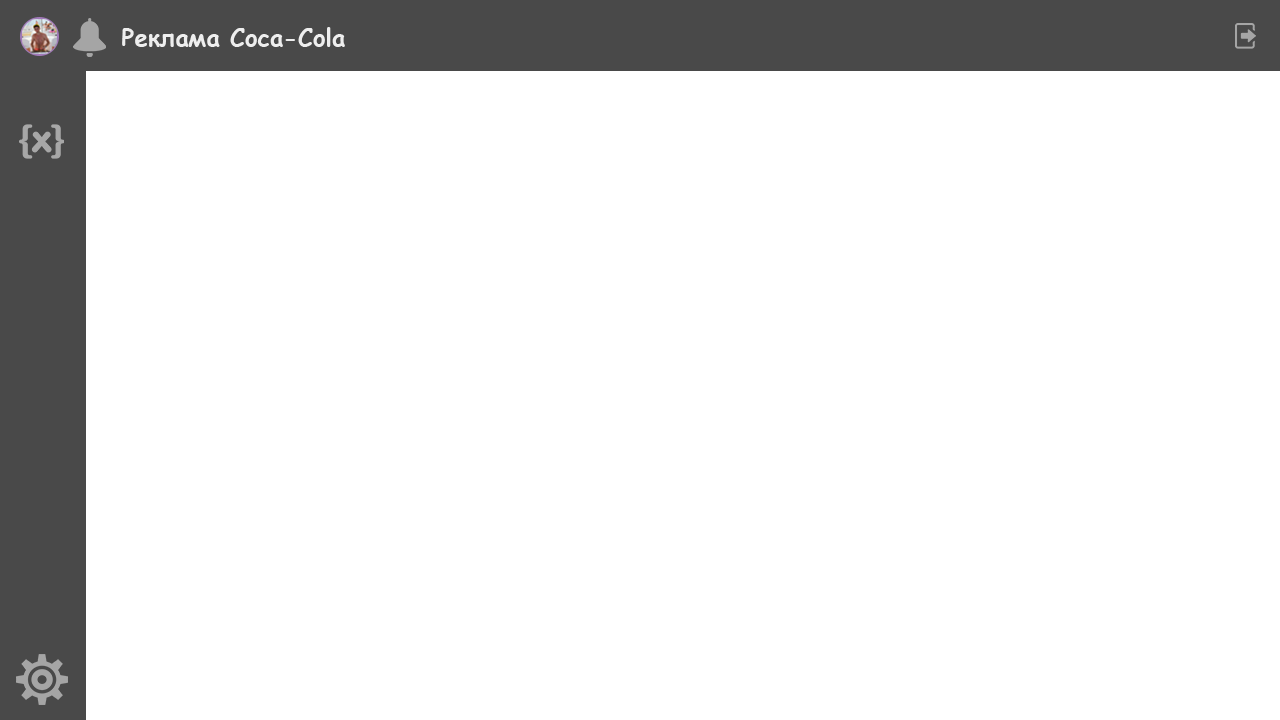
<style>
.page{position:relative;width:1280px;height:720px;background:#ffffff}
.page>*{position:absolute;margin:0}
.t1{font:24px "ComicSansMS-Bold";color:#eeeeee}
</style>
<div class="page">
<p class="t1" style="left:122px;top:27px;width:223px;height:20px">Реклама Coca-Cola</p>
</div>
